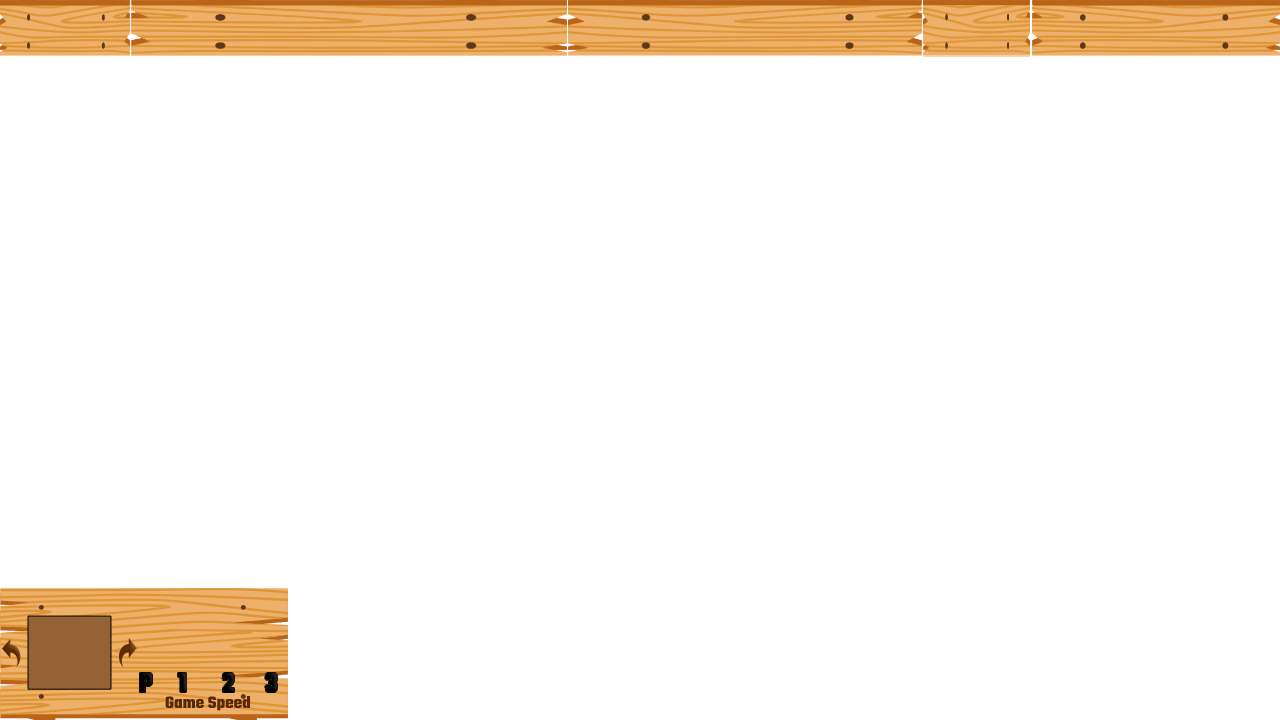
<style>
.page{position:relative;width:1280px;height:720px;background:#ffffff}
.page>*{position:absolute;margin:0}
.t1{font:29.7px "Square-Black";color:#000000;scale:0.87 1}
.t2{font:18px "Square-Black";color:#582900}
</style>
<div class="page">
<p class="t1" style="left:139px;top:672px;width:139px;height:21px">P     1       2      3</p>
<p class="t2" style="left:165px;top:695px;width:86px;height:16px">Game Speed</p>
</div>
